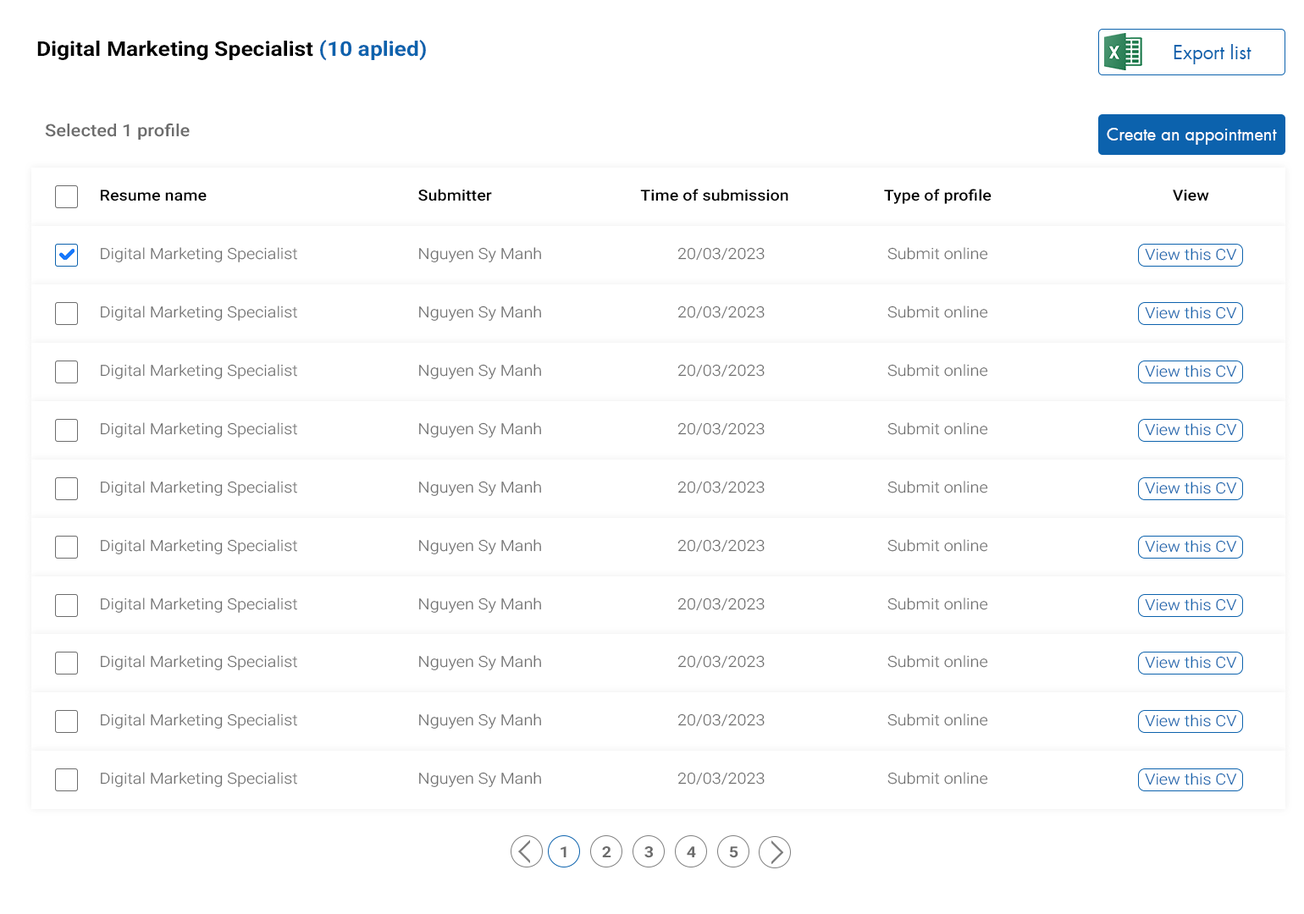
<style>
.page{position:relative;width:1304px;height:914px;background:#ffffff}
.page>*{position:absolute;margin:0}
.t1{font:20.3px "Roboto-Bold";color:#000000;scale:1.1 1}
.t2{font:20.3px "Roboto-Bold";color:#0c62ad;scale:1.1 1}
.t3{font:18.6px "SFUFuturaBook";color:#0c62ad}
.t4{font:16.9px "Roboto-Medium";color:#6c6c6c;scale:1.1 1}
.t5{font:16.9px "SFUFuturaBook";color:#ffffff}
.t6{font:15.2px "Roboto-Medium";color:#000000;scale:1.1 1}
.t7{font:15.2px "Roboto-Light";color:#6c6c6c;scale:1.1 1}
.t8{font:15.2px "Roboto-Light";color:#0c62ad;scale:1.1 1}
.t9{font:15.2px "Roboto-Bold";color:#6c6c6c;scale:1.1 1}
</style>
<div class="page">
<p class="t1" style="left:37px;top:40px;width:389px;height:21px">Digital Marketing Specialist <span class="t2">(10 aplied)</span></p>
<p class="t3" style="left:1174px;top:44px;width:77px;height:20px">Export list</p>
<p class="t4" style="left:45px;top:123px;width:145px;height:17px">Selected 1 profile</p>
<p class="t5" style="left:1107px;top:128px;width:170px;height:17px">Create an appointment</p>
<p class="t6" style="left:101px;top:190px;width:106px;height:12px">Resume name</p>
<p class="t6" style="left:418px;top:189px;width:74px;height:13px">Submitter</p>
<p class="t6" style="left:640px;top:189px;width:148px;height:13px">Time of submission</p>
<p class="t6" style="left:884px;top:189px;width:108px;height:15px">Type of profile</p>
<p class="t6" style="left:1173px;top:190px;width:36px;height:12px">View</p>
<p class="t7" style="left:101px;top:247px;width:196px;height:15px">Digital Marketing Specialist</p>
<p class="t7" style="left:419px;top:247px;width:122px;height:15px">Nguyen Sy Manh</p>
<p class="t7" style="left:677px;top:247px;width:88px;height:14px">20/03/2023</p>
<p class="t7" style="left:887px;top:247px;width:101px;height:13px">Submit online</p>
<p class="t8" style="left:1145px;top:248px;width:92px;height:13px">View this CV</p>
<p class="t7" style="left:101px;top:306px;width:196px;height:15px">Digital Marketing Specialist</p>
<p class="t7" style="left:419px;top:306px;width:122px;height:15px">Nguyen Sy Manh</p>
<p class="t7" style="left:677px;top:306px;width:88px;height:13px">20/03/2023</p>
<p class="t7" style="left:887px;top:306px;width:101px;height:12px">Submit online</p>
<p class="t8" style="left:1145px;top:307px;width:92px;height:12px">View this CV</p>
<p class="t7" style="left:101px;top:364px;width:196px;height:15px">Digital Marketing Specialist</p>
<p class="t7" style="left:419px;top:364px;width:122px;height:15px">Nguyen Sy Manh</p>
<p class="t7" style="left:677px;top:364px;width:88px;height:14px">20/03/2023</p>
<p class="t7" style="left:887px;top:364px;width:101px;height:13px">Submit online</p>
<p class="t8" style="left:1145px;top:365px;width:92px;height:13px">View this CV</p>
<p class="t7" style="left:101px;top:423px;width:196px;height:15px">Digital Marketing Specialist</p>
<p class="t7" style="left:419px;top:423px;width:122px;height:15px">Nguyen Sy Manh</p>
<p class="t7" style="left:677px;top:423px;width:88px;height:13px">20/03/2023</p>
<p class="t7" style="left:887px;top:423px;width:101px;height:12px">Submit online</p>
<p class="t8" style="left:1145px;top:423px;width:92px;height:13px">View this CV</p>
<p class="t7" style="left:101px;top:481px;width:196px;height:15px">Digital Marketing Specialist</p>
<p class="t7" style="left:419px;top:481px;width:122px;height:15px">Nguyen Sy Manh</p>
<p class="t7" style="left:677px;top:481px;width:88px;height:13px">20/03/2023</p>
<p class="t7" style="left:887px;top:481px;width:101px;height:13px">Submit online</p>
<p class="t8" style="left:1145px;top:482px;width:92px;height:12px">View this CV</p>
<p class="t7" style="left:101px;top:539px;width:196px;height:16px">Digital Marketing Specialist</p>
<p class="t7" style="left:419px;top:539px;width:122px;height:16px">Nguyen Sy Manh</p>
<p class="t7" style="left:677px;top:539px;width:88px;height:14px">20/03/2023</p>
<p class="t7" style="left:887px;top:539px;width:101px;height:13px">Submit online</p>
<p class="t8" style="left:1145px;top:540px;width:92px;height:13px">View this CV</p>
<p class="t7" style="left:101px;top:598px;width:196px;height:15px">Digital Marketing Specialist</p>
<p class="t7" style="left:419px;top:598px;width:122px;height:15px">Nguyen Sy Manh</p>
<p class="t7" style="left:677px;top:598px;width:88px;height:13px">20/03/2023</p>
<p class="t7" style="left:887px;top:598px;width:101px;height:12px">Submit online</p>
<p class="t8" style="left:1145px;top:599px;width:92px;height:12px">View this CV</p>
<p class="t7" style="left:101px;top:655px;width:196px;height:16px">Digital Marketing Specialist</p>
<p class="t7" style="left:419px;top:655px;width:122px;height:16px">Nguyen Sy Manh</p>
<p class="t7" style="left:677px;top:655px;width:88px;height:14px">20/03/2023</p>
<p class="t7" style="left:887px;top:655px;width:101px;height:13px">Submit online</p>
<p class="t8" style="left:1145px;top:656px;width:92px;height:13px">View this CV</p>
<p class="t7" style="left:101px;top:714px;width:196px;height:15px">Digital Marketing Specialist</p>
<p class="t7" style="left:419px;top:714px;width:122px;height:15px">Nguyen Sy Manh</p>
<p class="t7" style="left:677px;top:714px;width:88px;height:13px">20/03/2023</p>
<p class="t7" style="left:887px;top:714px;width:101px;height:12px">Submit online</p>
<p class="t8" style="left:1145px;top:715px;width:92px;height:12px">View this CV</p>
<p class="t7" style="left:101px;top:772px;width:196px;height:15px">Digital Marketing Specialist</p>
<p class="t7" style="left:419px;top:772px;width:122px;height:15px">Nguyen Sy Manh</p>
<p class="t7" style="left:677px;top:772px;width:88px;height:14px">20/03/2023</p>
<p class="t7" style="left:887px;top:772px;width:101px;height:13px">Submit online</p>
<p class="t8" style="left:1145px;top:773px;width:92px;height:13px">View this CV</p>
<p class="t9" style="left:561px;top:847px;width:5px;height:11px">1</p>
<p class="t9" style="left:602px;top:847px;width:9px;height:11px">2</p>
<p class="t9" style="left:644px;top:847px;width:9px;height:12px">3</p>
<p class="t9" style="left:687px;top:847px;width:9px;height:11px">4</p>
<p class="t9" style="left:729px;top:847px;width:9px;height:12px">5</p>
</div>
